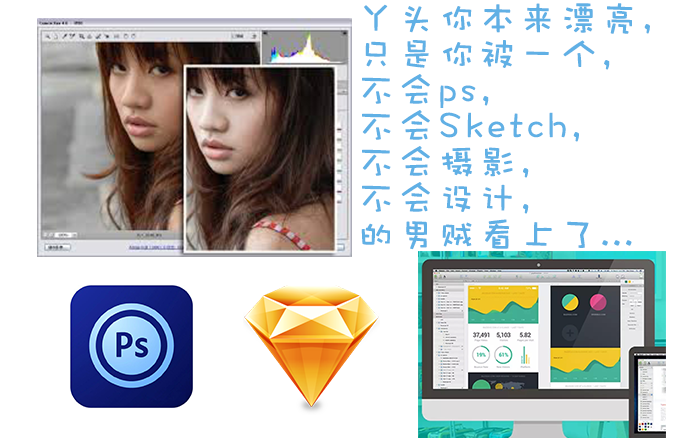
<style>
.page{position:relative;width:700px;height:438px;background:#ffffff}
.page>*{position:absolute;margin:0}
.t1{font:36px/36px "DFWaWaSC-W5";letter-spacing:0.1em;color:#60b0e5;font-weight:bold}
</style>
<div class="page">
<p class="t1" style="left:361px;top:3px;width:289px;height:247px">丫头你本来漂亮，<br>只是你被一个，<br>不会ps，<br>不会Sketch，<br>不会摄影，<br>不会设计，<br>的男贼看上了...</p>
</div>
